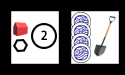
<style>
.page{position:relative;width:125px;height:75px;background:#000000}
.page>*{position:absolute;margin:0}
.t1{font:12.5px "KozGoPr6N-Bold";color:#000000}
</style>
<div class="page">
<p class="t1" style="left:41px;top:30px;width:6px;height:10px">2</p>
</div>
